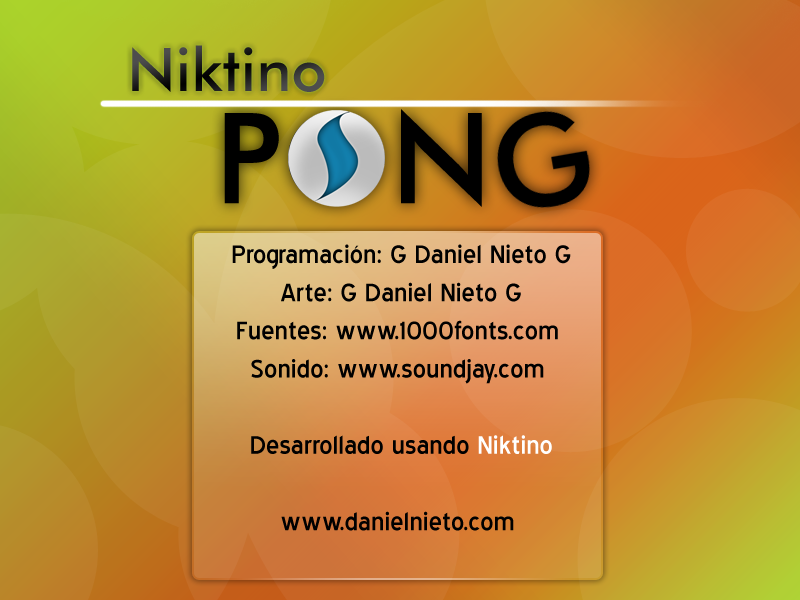
<style>
.page{position:relative;width:800px;height:600px}
.page>*{position:absolute;margin:0}
.t1{font:60px "FuturaBT-Medium"}
.t2{font:31.8px "BlueHighway";color:#000000;scale:1.04 1}
.t3{font:31.8px "BlueHighway";color:#ffffff;scale:1.04 1}
</style>
<div class="page">
<p class="t1" style="left:132px;top:45px;width:193px;height:47px">Niktino</p>
<p class="t2" style="left:232px;top:244px;width:339px;height:287px;text-align:center">Programación: G Daniel Nieto G<br> Arte: G Daniel Nieto G<br>Fuentes: www.1000fonts.com<br>Sonido: www.soundjay.com<br><br> Desarrollado usando <span class="t3">Niktino<br></span><br>www.danielnieto.com</p>
</div>
